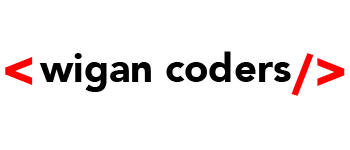
<style>
.page{position:relative;width:350px;height:150px;background:#ffffff}
.page>*{position:absolute;margin:0}
.t1{font:39.9px "Avenir-Black";color:#000000}
.t2{font:53.1px "Avenir-Black";color:#ff0000}
</style>
<div class="page">
<p class="t1" style="left:39px;top:51px;width:252px;height:41px">wigan coders</p>
<p class="t2" style="left:291px;top:53px;width:54px;height:43px;rotate:180deg">&lt;/</p>
<p class="t2" style="left:5px;top:57px;width:28px;height:28px">&lt;</p>
</div>
